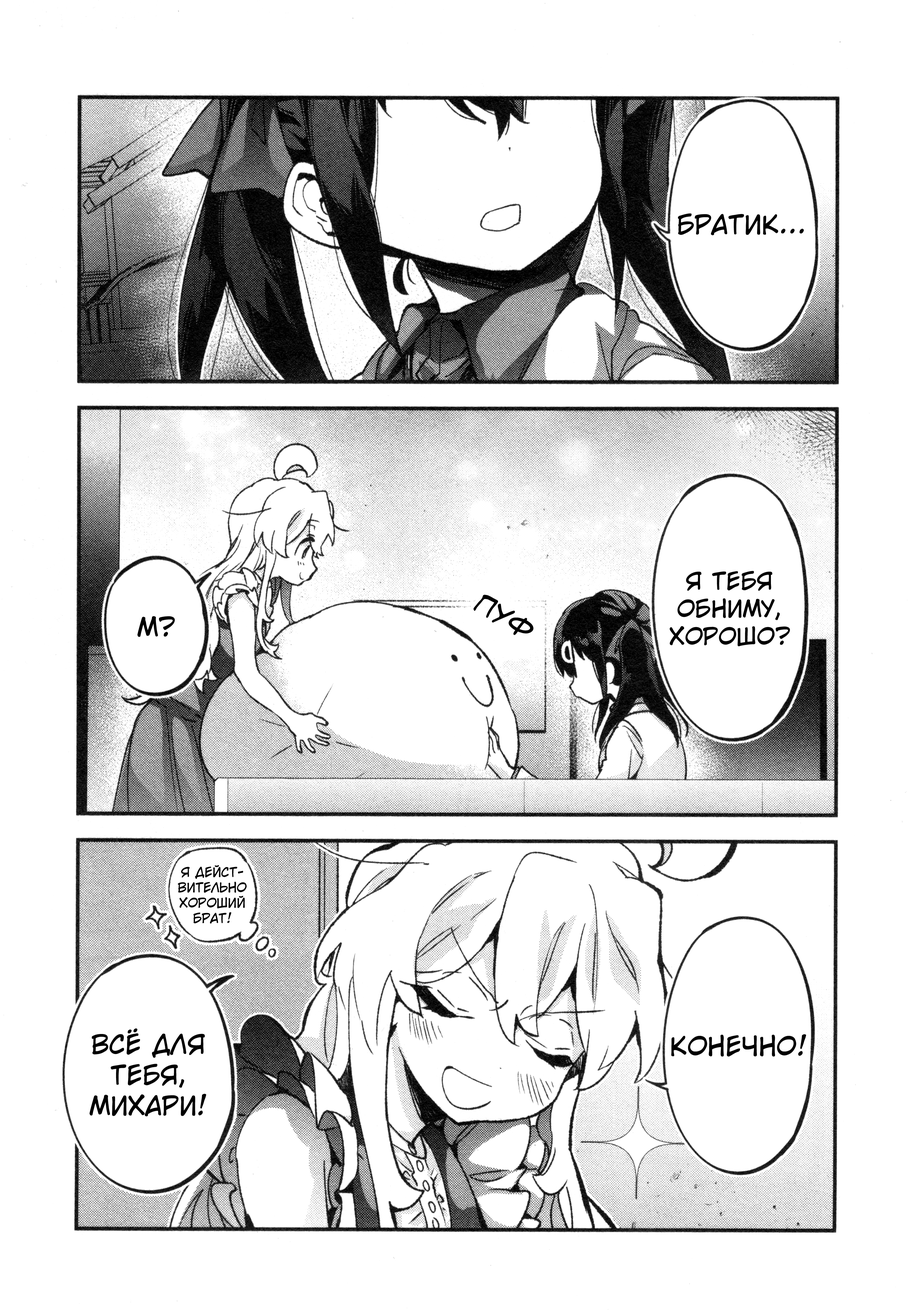
<style>
.page{position:relative;width:910px;height:1310px;background:#ffffff}
.page>*{position:absolute;margin:0}
.t1{font:25.6px "v_CCWildWordsLower";letter-spacing:0.006em;color:#000000;text-transform:uppercase}
.t2{font:23px "v_CCWildWordsLower";letter-spacing:0.006em;color:#000000;text-transform:uppercase}
.t3{font:35.8px "v_HometownHeroBB";letter-spacing:0.006em;color:#000000;text-transform:uppercase}
.t4{font:12.8px "v_CCWildWordsLower";letter-spacing:0.006em;color:#000000;text-transform:uppercase}
</style>
<div class="page">
<p class="t1" style="left:678px;top:213px;width:126px;height:23px">Братик...</p>
<p class="t2" style="left:670px;top:571px;width:120px;height:75px;text-align:center">Я тебя обниму, хорошо?</p>
<p class="t3" style="left:473px;top:595px;width:61px;height:40px;rotate:32deg">Пуф</p>
<p class="t1" style="left:137px;top:616px;width:38px;height:21px">М?</p>
<p class="t4" style="left:178px;top:865px;width:69px;height:59px;text-align:center">Я дейст-<br>вительно хороший брат!</p>
<p class="t1" style="left:89px;top:1028px;width:117px;height:89px;text-align:center">Всё для тебя, Михари!</p>
<p class="t1" style="left:671px;top:1034px;width:135px;height:23px">Конечно!</p>
</div>
